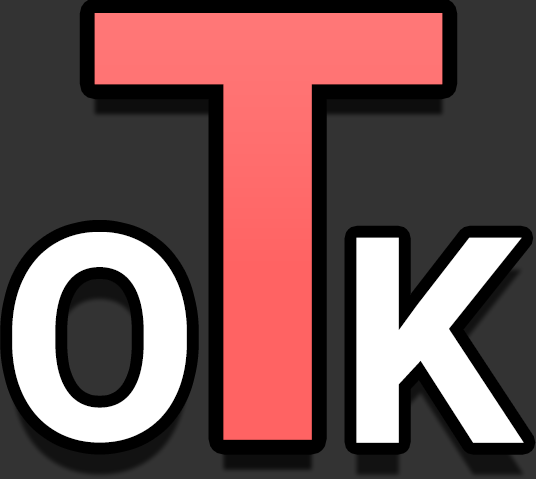
<style>
.page{position:relative;width:536px;height:479px;background:#333333}
.page>*{position:absolute;margin:0}
.t1{font:600px "Roboto-Bold";color:#ff6363}
.t2{font:288px "Roboto-Bold";color:#ffffff}
</style>
<div class="page">
<p class="t1" style="left:94px;top:13px;width:349px;height:427px">T</p>
<p class="t2" style="left:12px;top:232px;width:175px;height:211px">O</p>
<p class="t2" style="left:356px;top:237px;width:168px;height:206px">K</p>
</div>
